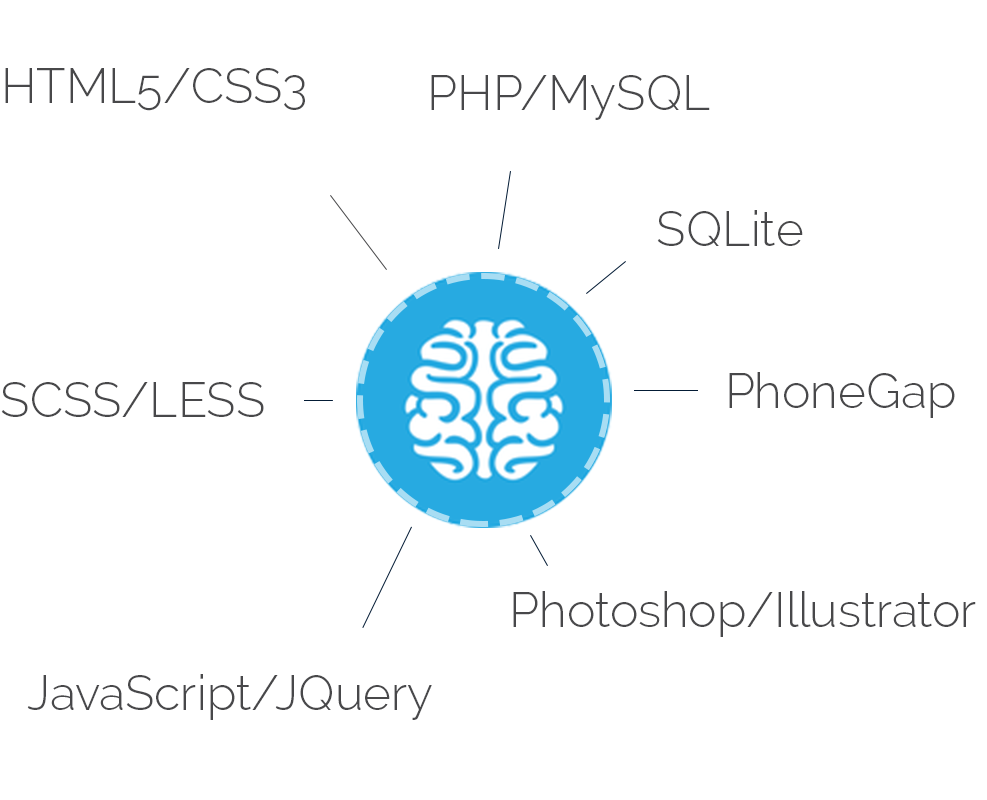
<style>
.page{position:relative;width:987px;height:800px;background:#ffffff}
.page>*{position:absolute;margin:0}
.t1{font:48px "Raleway-Light";color:#48484a}
</style>
<div class="page">
<p class="t1" style="left:5px;top:68px;width:300px;height:43px">HTML5/CSS3</p>
<p class="t1" style="left:431px;top:75px;width:279px;height:45px">PHP/MySQL</p>
<p class="t1" style="left:657px;top:210px;width:146px;height:36px">SQLite</p>
<p class="t1" style="left:729px;top:372px;width:226px;height:46px">PhoneGap</p>
<p class="t1" style="left:1px;top:382px;width:263px;height:35px">SCSS/LESS</p>
<p class="t1" style="left:513px;top:591px;width:463px;height:46px">Photoshop/Illustrator</p>
<p class="t1" style="left:27px;top:674px;width:405px;height:46px">JavaScript/JQuery</p>
</div>
